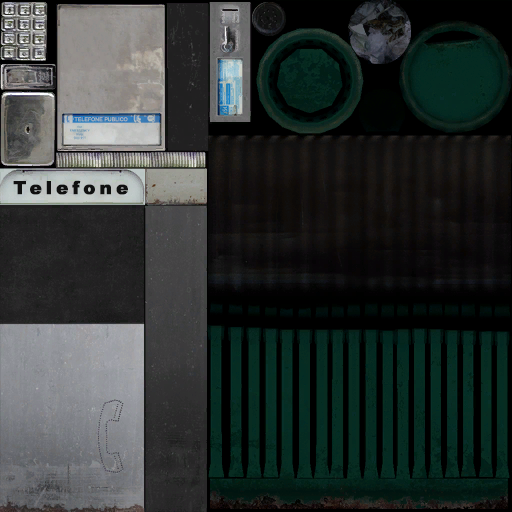
<style>
.page{position:relative;width:512px;height:512px}
.page>*{position:absolute;margin:0}
.t1{font:5px "ArialMT";color:#b5babd;text-transform:uppercase;font-weight:bold}
.t2{font:18px "Arial-Black";letter-spacing:0.2em;color:#101010;font-weight:bold}
</style>
<div class="page">
<p class="t1" style="left:74px;top:117px;width:54px;height:5px">telefone publico</p>
<p class="t2" style="left:13px;top:180px;width:115px;height:15px">Telefone</p>
</div>
